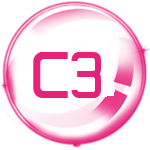
<style>
.page{position:relative;width:150px;height:150px;background:#ffffff}
.page>*{position:absolute;margin:0}
.t1{font:60.5px "TRENDS";letter-spacing:-0.385em;color:#e62179;scale:0.95 1}
</style>
<div class="page">
<p class="t1" style="left:33px;top:52px;width:68px;height:46px">Ｃ３</p>
</div>
